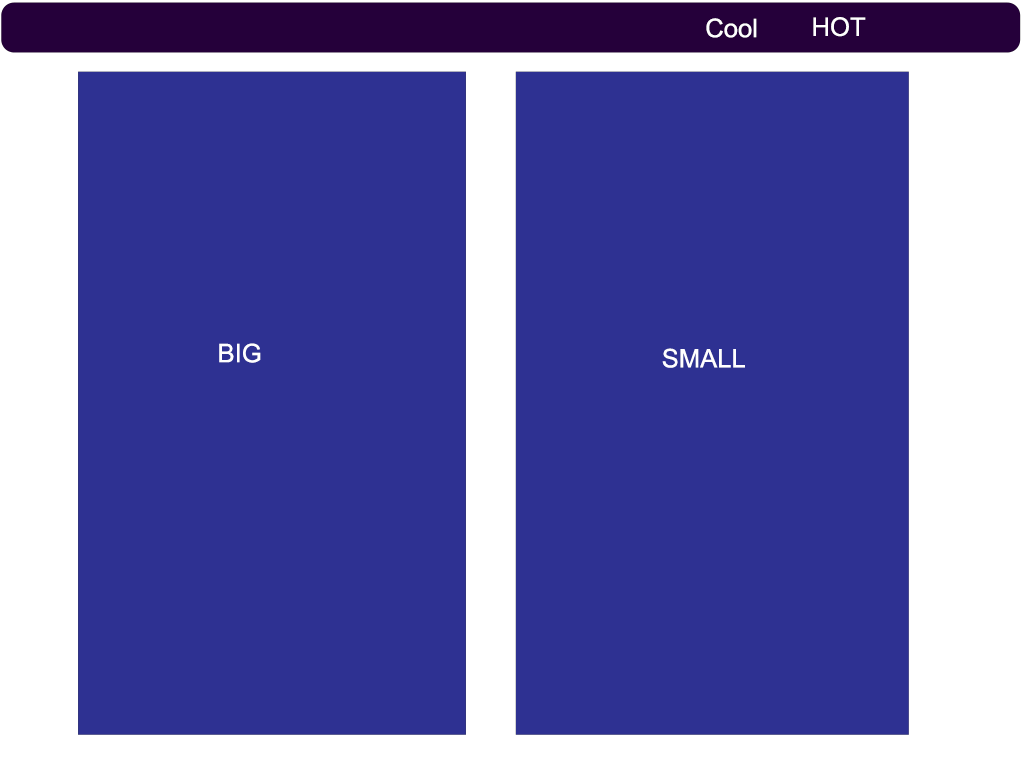
<style>
.page{position:relative;width:1024px;height:768px;background:#2e3192}
.page>*{position:absolute;margin:0}
.t1{font:25.6px "ArialMT";color:#ffffff}
</style>
<div class="page">
<p class="t1" style="left:813px;top:17px;width:53px;height:20px">HOT</p>
<p class="t1" style="left:706px;top:18px;width:51px;height:20px">Cool</p>
<p class="t1" style="left:219px;top:343px;width:42px;height:20px">BIG</p>
<p class="t1" style="left:662px;top:348px;width:83px;height:20px">SMALL</p>
</div>
